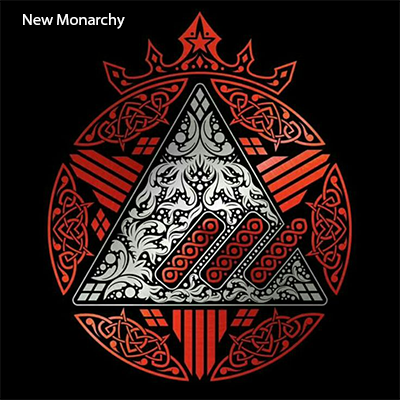
<style>
.page{position:relative;width:400px;height:400px;background:#000000}
.page>*{position:absolute;margin:0}
.t1{font:16.3px "MyriadPro-Regular";color:#ffffff}
</style>
<div class="page">
<p class="t1" style="left:23px;top:13px;width:102px;height:16px">New Monarchy</p>
</div>
